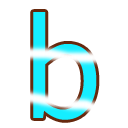
<style>
.page{position:relative;width:128px;height:128px;background:#ffffff}
.page>*{position:absolute;margin:0}
.t1{font:132.9px "SourceHanSansCN-Regular";color:#15eeff}
</style>
<div class="page">
<p class="t1" style="left:33px;top:12px;width:64px;height:108px">b</p>
</div>
